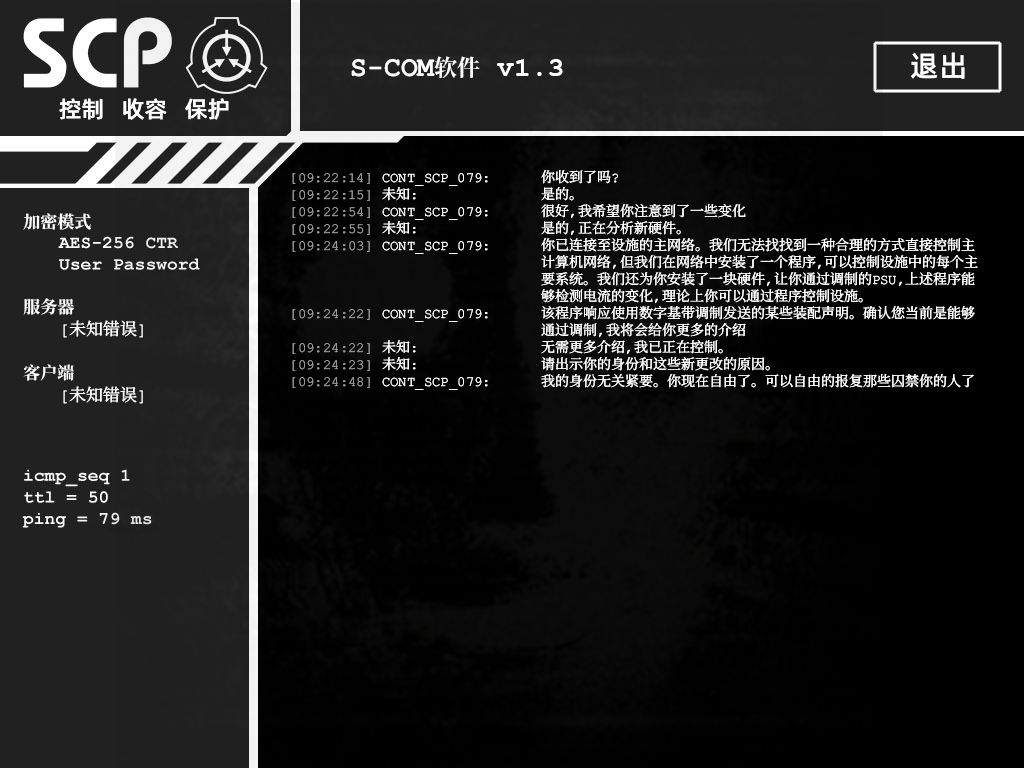
<style>
.page{position:relative;width:1024px;height:768px}
.page>*{position:absolute;margin:0}
.t1{font:29px "AlibabaPuHuiTiM";color:#ffffff}
.t2{font:28px "ContainmentBreach-Bold";color:#ffffff}
.t3{font:23px "ContainmentBreach-Bold";color:#ffffff}
.t4{font:28px "CourierNewPS-BoldMT";color:#ffffff}
.t5{font:23px "AlibabaPuHuiTiM";color:#ffffff}
.t6{font:14px/17px "ContainmentBreach-Regular";color:#ffffff}
.t7{font:14px/17px "ContainmentBreach-Regular";color:#969696}
.t8{font:17px/18px "ContainmentBreach-Regular";color:#ffffff}
.t9{font:17px/17px "ContainmentBreach-Bold";color:#ffffff}
.t10{font:17px/22px "ContainmentBreach-Bold";color:#ffffff}
.t11{font:17px/22px "ContainmentBreach-Regular";color:#ffffff}
</style>
<div class="page">
<p class="t1" style="left:911px;top:52px;width:54px;height:27px">退出</p>
<p class="t2" style="left:351px;top:56px;width:212px;height:22px">S-COM<span class="t3">软件 </span><span class="t4">v1.3</span></p>
<p class="t5" style="left:59px;top:98px;width:170px;height:22px">控制   收容   保护</p>
<p class="t6" style="left:292px;top:170px;width:686px;height:220px"><span class="t7">【09:22:14】</span> CONT_SCP_079：  你收到了吗？<br><span class="t7">【09:22:15】</span> 未知：    是的。<br><span class="t7">【09:22:54】</span> CONT_SCP_079：  很好，我希望你注意到了一些变化<br><span class="t7">【09:22:55】</span> 未知：    是的，正在分析新硬件。<br><span class="t7">【09:24:03】</span> CONT_SCP_079：  你已连接至设施的主网络。我们无法找找到一种合理的方式直接控制主<br>       计算机网络，但我们在网络中安装了一个程序，可以控制设施中的每个主<br>       要系统。我们还为你安装了一块硬件，让你通过调制的PSU，上述程序能<br>       够检测电流的变化，理论上你可以通过程序控制设施。<br><span class="t7">【09:24:22】</span> CONT_SCP_079：  该程序响应使用数字基带调制发送的某些装配声明。确认您当前是能够<br>       通过调制，我将会给你更多的介绍<br><span class="t7">【09:24:22】</span> 未知：    无需更多介绍，我已正在控制。<br><span class="t7">【09:24:23】</span> 未知：    请出示你的身份和这些新更改的原因。<br><span class="t7">【09:24:48】</span> CONT_SCP_079：  我的身份无关紧要。你现在自由了。可以自由的报复那些囚禁你的人了</p>
<p class="t8" style="left:23px;top:213px;width:120px;height:191px"><span class="t9">加密模式<br><br><br><br><br></span><span class="t10">服务器<br> </span>[未知错误]<br><br><span class="t10">客户端<br> </span><span class="t11">[未知错误]</span></p>
</div>
